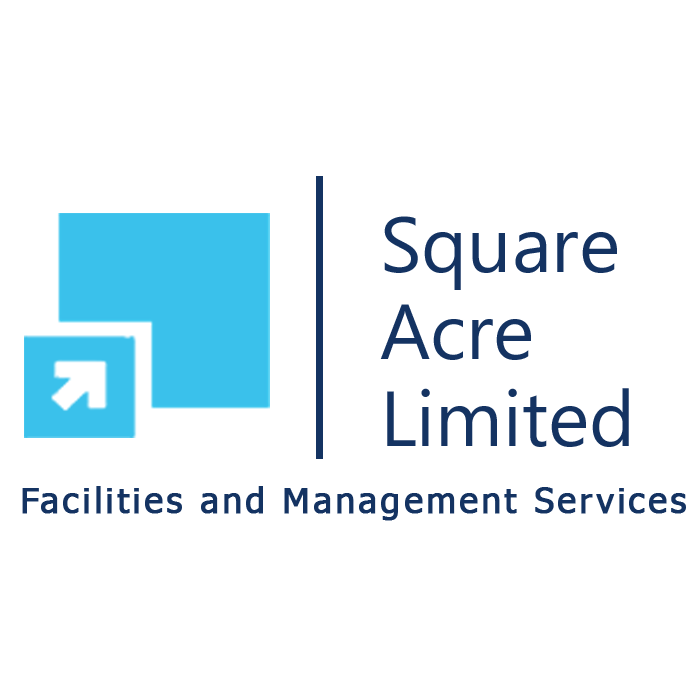
<style>
.page{position:relative;width:700px;height:700px;background:#ffffff}
.page>*{position:absolute;margin:0}
.t1{font:77.9px/86.7px "SegoeUI";color:#143362}
.t2{font:35.4px "Tahoma";letter-spacing:0.07em;color:#143362;font-weight:bold}
</style>
<div class="page">
<p class="t1" style="left:380px;top:216px;width:249px;height:231px">Square<br>Acre<br>Limited</p>
<p class="t2" style="left:22px;top:486px;width:664px;height:35px">Facilities and Management Services</p>
</div>
